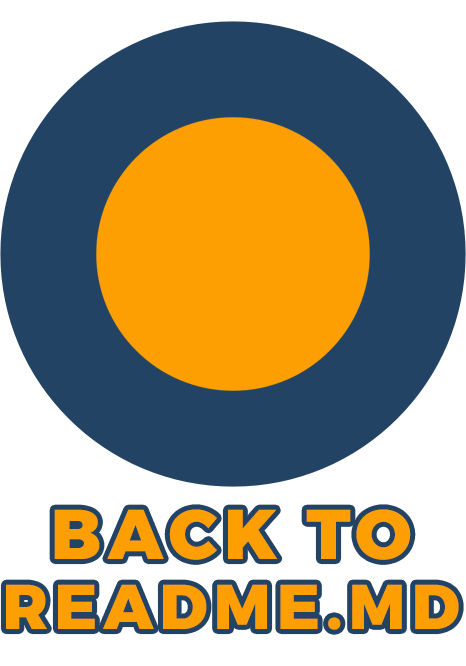
<style>
.page{position:relative;width:466px;height:666px;background:#224364}
.page>*{position:absolute;margin:0}
.t1{font:63px/70px "Montserrat-ExtraBold";letter-spacing:0.1em;color:#fd9f03}
.t2{font:70px/70px "Montserrat-ExtraBold";letter-spacing:0.1em;color:#fd9f03}
</style>
<div class="page">
<p class="t1" style="left:6px;top:509px;width:453px;height:121px;text-align:center"><span class="t2">BACK TO<br></span>README.MD</p>
</div>
